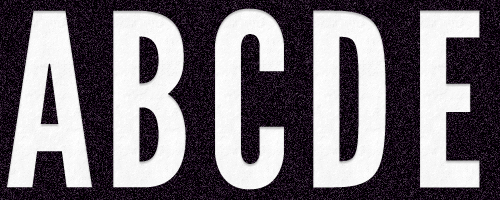
<style>
.page{position:relative;width:500px;height:200px}
.page>*{position:absolute;margin:0}
.t1{font:240px "LeagueGothic";color:#f8f8f8}
</style>
<div class="page">
<p class="t1" style="left:7px;top:10px;width:85px;height:178px">A</p>
<p class="t1" style="left:113px;top:10px;width:73px;height:178px">B</p>
<p class="t1" style="left:215px;top:8px;width:69px;height:182px">C</p>
<p class="t1" style="left:313px;top:10px;width:73px;height:178px">D</p>
<p class="t1" style="left:420px;top:10px;width:60px;height:178px">E</p>
</div>
